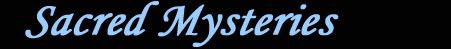
<style>
.page{position:relative;width:451px;height:49px;background:#020202}
.page>*{position:absolute;margin:0}
.t1{font:48px "MonotypeCorsiva";color:#99ccff;font-weight:bold;font-style:italic}
</style>
<div class="page">
<p class="t1" style="left:25px;top:1px;width:314px;height:46px">Sacred Mysteries</p>
</div>
